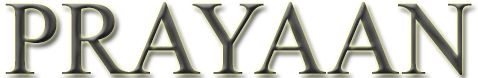
<style>
.page{position:relative;width:478px;height:78px;background:#ffffff}
.page>*{position:absolute;margin:0}
.t1{font:105.5px "TimesNewRomanPSMT";scale:0.96 1}
</style>
<div class="page">
<p class="t1" style="left:5px;top:2px;width:467px;height:73px">PRAYAAN</p>
</div>
